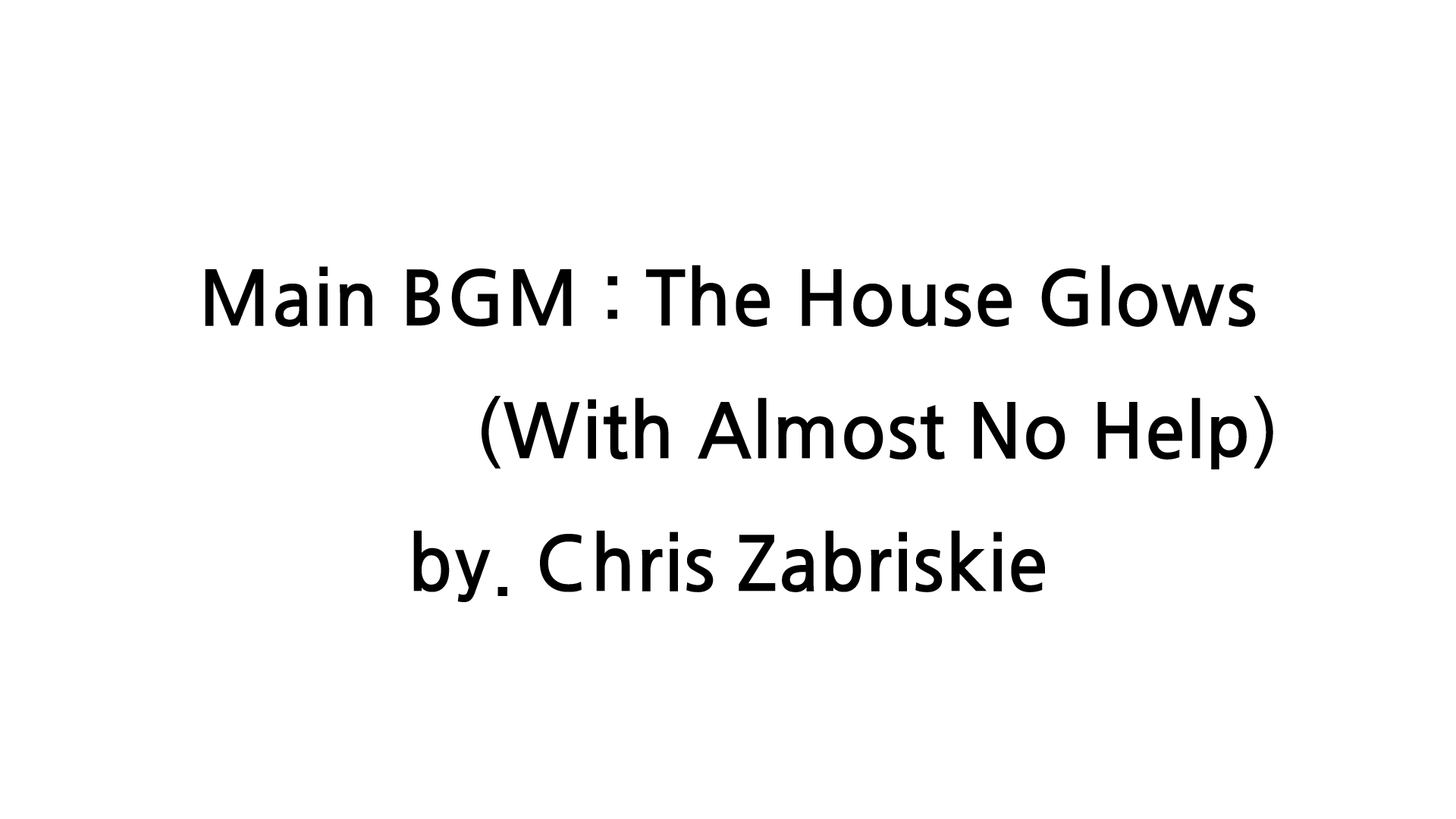
<style>
.page{position:relative;width:1456px;height:819px;background:#ffffff}
.page>*{position:absolute;margin:0}
.t1{font:75.8px "JejuGothic";color:#000000}
</style>
<div class="page">
<p class="t1" style="left:205px;top:265px;width:1068px;height:337px;text-align:center">Main BGM : The House Glows<br>              (With Almost No Help)<br>by. Chris Zabriskie</p>
</div>
